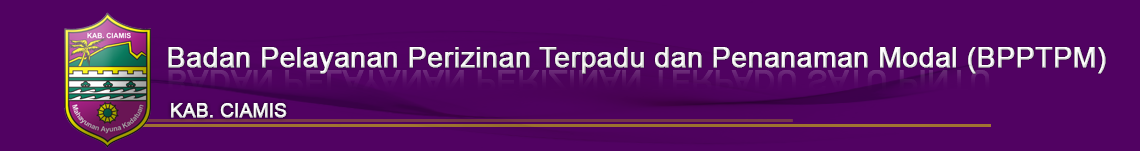
<style>
.page{position:relative;width:1140px;height:151px;background:#510262}
.page>*{position:absolute;margin:0}
.t1{font:28px "ArialMT";color:#ffffff;font-weight:bold}
.t2{font:18.6px "ArialMT";color:#ffffff;font-weight:bold}
</style>
<div class="page">
<p class="t1" style="left:168px;top:47px;width:938px;height:27px">Badan Pelayanan Perizinan Terpadu dan Penanaman Modal (BPPTPM)</p>
<p class="t2" style="left:171px;top:103px;width:116px;height:15px">KAB. CIAMIS</p>
</div>
